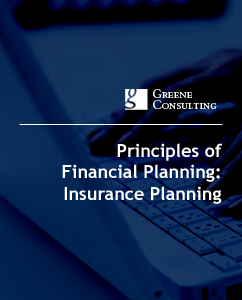
<style>
.page{position:relative;width:242px;height:300px}
.page>*{position:absolute;margin:0}
.t1{font:12.9px/11px "Bembo-SC";letter-spacing:0.01em;color:#fffefe}
.t2{font:18px "TrebuchetMS-Bold";color:#ffffff}
</style>
<div class="page">
<p class="t1" style="left:153px;top:89px;width:64px;height:20px">Greene<br>Consulting</p>
<p class="t2" style="left:62px;top:143px;width:160px;height:61px;text-align:right">Principles of<br>Financial Planning:<br>Insurance Planning</p>
</div>
